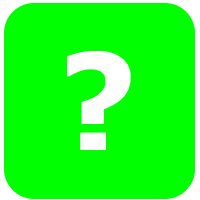
<style>
.page{position:relative;width:200px;height:200px;background:#00ff00}
.page>*{position:absolute;margin:0}
.t1{font:133.3px "Tahoma-Bold";letter-spacing:0.2em;color:#ffffff;text-transform:uppercase}
</style>
<div class="page">
<p class="t1" style="left:67px;top:51px;width:64px;height:99px">?</p>
</div>
